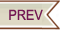
<style>
.page{position:relative;width:60px;height:30px}
.page>*{position:absolute;margin:0}
.t1{font:14px "ArialMT";color:#731953;scale:0.9 1}
</style>
<div class="page">
<p class="t1" style="left:9px;top:9px;width:34px;height:11px">PREV</p>
</div>
